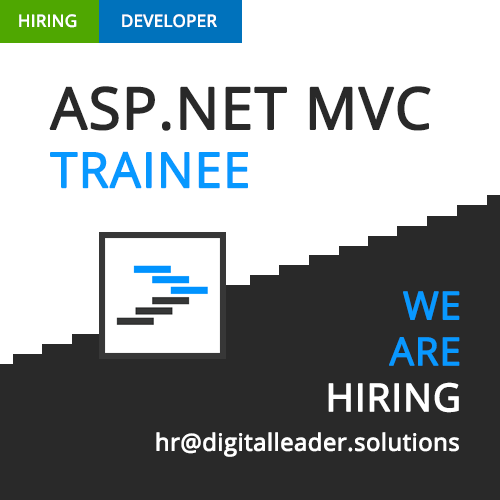
<style>
.page{position:relative;width:500px;height:500px;background:#ffffff}
.page>*{position:absolute;margin:0}
.t1{font:16.7px "OpenSans";color:#ffffff;text-transform:uppercase;font-weight:bold}
.t2{font:58px "OpenSans";color:#292929;text-transform:uppercase;font-weight:bold}
.t3{font:48.6px "OpenSans";color:#0898ff;text-transform:uppercase;font-weight:bold}
.t4{font:38.3px "OpenSans";color:#0898ff;text-transform:uppercase;font-weight:bold}
.t5{font:38.3px "OpenSans";color:#ffffff;text-transform:uppercase;font-weight:bold}
.t6{font:23.6px "OpenSans";color:#ffffff;font-weight:bold}
</style>
<div class="page">
<p class="t1" style="left:19px;top:14px;width:58px;height:14px">hiring</p>
<p class="t1" style="left:122px;top:14px;width:95px;height:14px">developer</p>
<p class="t2" style="left:49px;top:86px;width:382px;height:103px">ASP.NET MVC<br><span class="t3">Trainee</span></p>
<p class="t4" style="left:328px;top:291px;width:132px;height:122px;text-align:right">We<br>are<br><span class="t5">hiring</span></p>
<p class="t6" style="left:156px;top:432px;width:303px;height:25px">hr@digitalleader.solutions</p>
</div>
